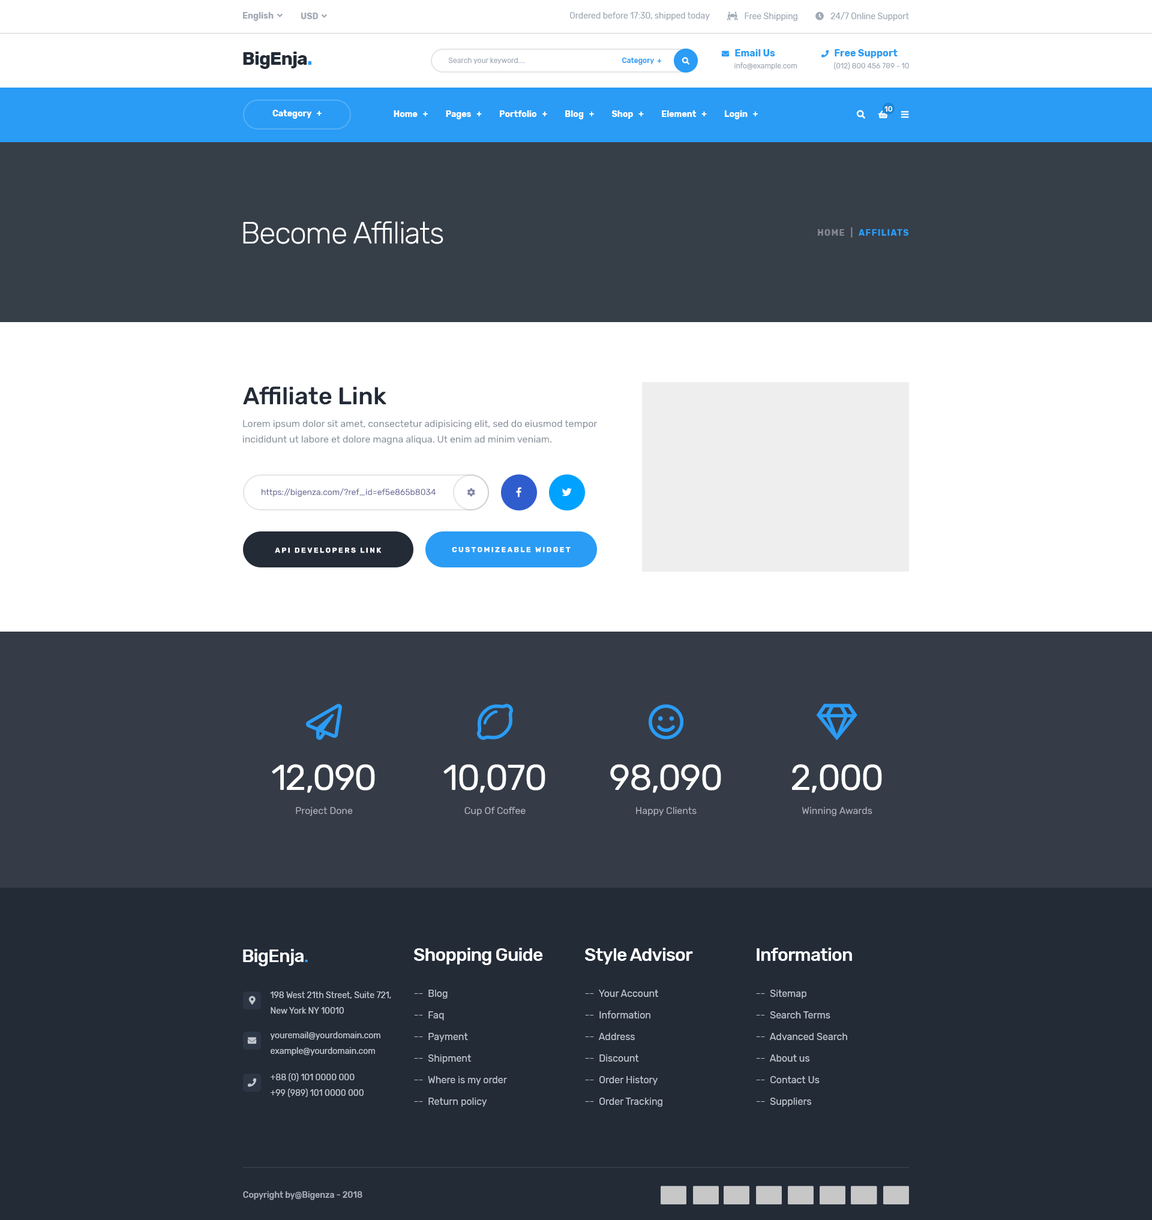
<style>
.page{position:relative;width:1152px;height:1220px;background:#ffffff}
.page>*{position:absolute;margin:0}
.t1{font:8.4px "Rubik-Regular";color:#a2aab6}
.t2{font:18px "Rubik-Bold";letter-spacing:-0.03em;color:#232b37}
.t3{font:18px "Rubik-Bold";letter-spacing:-0.03em;color:#2a9cf5}
.t4{font:7.2px/12px "Rubik-Regular";color:#a2aab6}
.t5{font:7.2px/12px "FontAwesome5FreeSolid";color:#2a9cf5}
.t6{font:9.6px/12px "Rubik-Bold";color:#2a9cf5}
.t7{font:7.2px "Rubik-Regular";color:#a2aab6}
.t8{font:7.2px "Rubik-Medium";color:#2a9cf5}
.t9{font:8.4px "Rubik-Bold";color:#ffffff}
.t10{font:7.2px "Rubik-Medium";color:#ffffff}
.t11{font:30px "Rubik-Light";letter-spacing:-0.03em;color:#ffffff}
.t12{font:8.4px "Rubik-Bold";letter-spacing:0.1em;color:#2a9cf5;text-transform:uppercase}
.t13{font:8.4px "Rubik-Bold";letter-spacing:0.1em;color:#848792;text-transform:uppercase}
.t14{font:24px "Rubik-Medium";color:#232b37}
.t15{font:9.6px/15.6px "Rubik-Regular";color:#838b97}
.t16{font:8.4px "Rubik-Regular";color:#616191}
.t17{font:7.2px "Rubik-Bold";letter-spacing:0.2em;color:#ffffff;text-transform:uppercase}
.t18{font:9.6px/24px "Rubik-Regular";color:#b2b2bf}
.t19{font:36px/24px "Rubik-Regular";letter-spacing:-0.03em;color:#ffffff}
.t20{font:18px "Rubik-Medium";letter-spacing:-0.03em;color:#ffffff}
.t21{font:18px "Rubik-Medium";letter-spacing:-0.03em;color:#2a9cf5}
.t22{font:9.6px/21.6px "Rubik-Regular";color:#c1c6ce}
.t23{font:8.4px/15.6px "Rubik-Regular";color:#c1c6ce}
.t24{font:8.4px "Rubik-Medium";color:#a4abb6}
</style>
<div class="page">
<p class="t1" style="left:570px;top:12px;width:140px;height:8px">Ordered before 17:30, shipped today</p>
<p class="t2" style="left:243px;top:52px;width:68px;height:17px">BigEnja<span class="t3">.</span></p>
<p class="t4" style="left:821px;top:49px;width:88px;height:21px"><span class="t5">phone  </span><span class="t6">Free Support<br>      </span> (012) 800 456 789 - 10</p>
<p class="t7" style="left:448px;top:58px;width:77px;height:6px">Search your keyword....</p>
<p class="t8" style="left:622px;top:58px;width:40px;height:7px">Category  +</p>
<p class="t9" style="left:272px;top:110px;width:50px;height:9px">Category   +</p>
<p class="t9" style="left:394px;top:110px;width:364px;height:9px">Home   +          Pages   +          Portfolio   +          Blog   +          Shop   +          Element   +          Login   +</p>
<p class="t10" style="left:884px;top:106px;width:9px;height:6px">10</p>
<p class="t11" style="left:243px;top:221px;width:200px;height:23px">Become Affiliats</p>
<p class="t12" style="left:818px;top:227px;width:91px;height:11px"><span class="t13">home  |  </span>affiliats</p>
<p class="t14" style="left:243px;top:386px;width:143px;height:19px">Affiliate Link</p>
<p class="t15" style="left:242px;top:420px;width:355px;height:25px">Lorem ipsum dolor sit amet, consectetur adipisicing elit, sed do eiusmod tempor<br>incididunt ut labore et dolore magna aliqua. Ut enim ad minim veniam.</p>
<p class="t16" style="left:262px;top:488px;width:174px;height:9px">https://bigenza.com/?ref_id=ef5e865b8034</p>
<p class="t17" style="left:275px;top:547px;width:107px;height:6px">API developers link</p>
<p class="t17" style="left:452px;top:547px;width:119px;height:6px">customizeable widget</p>
<p class="t18" style="left:272px;top:764px;width:103px;height:52px;text-align:center"><span class="t19">12,090<br></span>Project Done</p>
<p class="t18" style="left:443px;top:764px;width:102px;height:52px;text-align:center"><span class="t19">10,070<br></span>Cup Of Coffee</p>
<p class="t18" style="left:610px;top:764px;width:111px;height:52px;text-align:center"><span class="t19">98,090<br></span>Happy Clients</p>
<p class="t18" style="left:792px;top:764px;width:90px;height:53px;text-align:center"><span class="t19">2,000<br></span>Winning Awards</p>
<p class="t20" style="left:243px;top:949px;width:65px;height:18px">BigEnja<span class="t21">.</span></p>
<p class="t20" style="left:414px;top:948px;width:129px;height:17px">Shopping Guide</p>
<p class="t20" style="left:585px;top:948px;width:108px;height:17px">Style Advisor</p>
<p class="t20" style="left:757px;top:948px;width:95px;height:13px">Information</p>
<p class="t22" style="left:414px;top:990px;width:93px;height:117px">--  Blog<br>--  Faq<br>--  Payment<br>--  Shipment<br>--  Where is my order<br>--  Return policy</p>
<p class="t22" style="left:585px;top:990px;width:77px;height:117px">--  Your Account<br>--  Information<br>--  Address<br>--  Discount<br>--  Order History<br>--  Order Tracking</p>
<p class="t22" style="left:756px;top:990px;width:91px;height:117px">--  Sitemap<br>--  Search Terms<br>--  Advanced Search<br>--  About us<br>--  Contact Us<br>--  Suppliers</p>
<p class="t23" style="left:270px;top:992px;width:121px;height:22px">198 West 21th Street, Suite 721,<br>New York NY 10010</p>
<p class="t23" style="left:270px;top:1032px;width:110px;height:24px">youremail@yourdomain.com<br>example@yourdomain.com</p>
<p class="t23" style="left:271px;top:1073px;width:93px;height:24px">+88 (0) 101 0000 000<br>+99 (989) 101 0000 000</p>
<p class="t24" style="left:243px;top:1192px;width:119px;height:9px">Copyright by@Bigenza - 2018</p>
</div>
